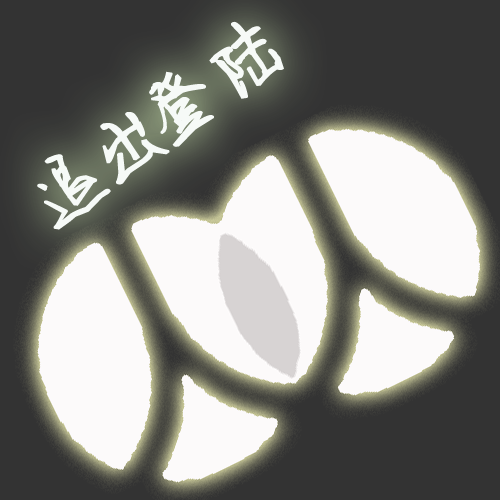
<style>
.page{position:relative;width:500px;height:500px;background:#333333}
.page>*{position:absolute;margin:0}
.t1{font:72px "Ò¶¸ùÓÑ·ÇÖ÷Á÷ÊÖÐ´";color:#f6faf7;font-weight:bold}
</style>
<div class="page">
<p class="t1" style="left:37px;top:21px;width:247px;height:209px;rotate:-36deg">退出登陆</p>
</div>
